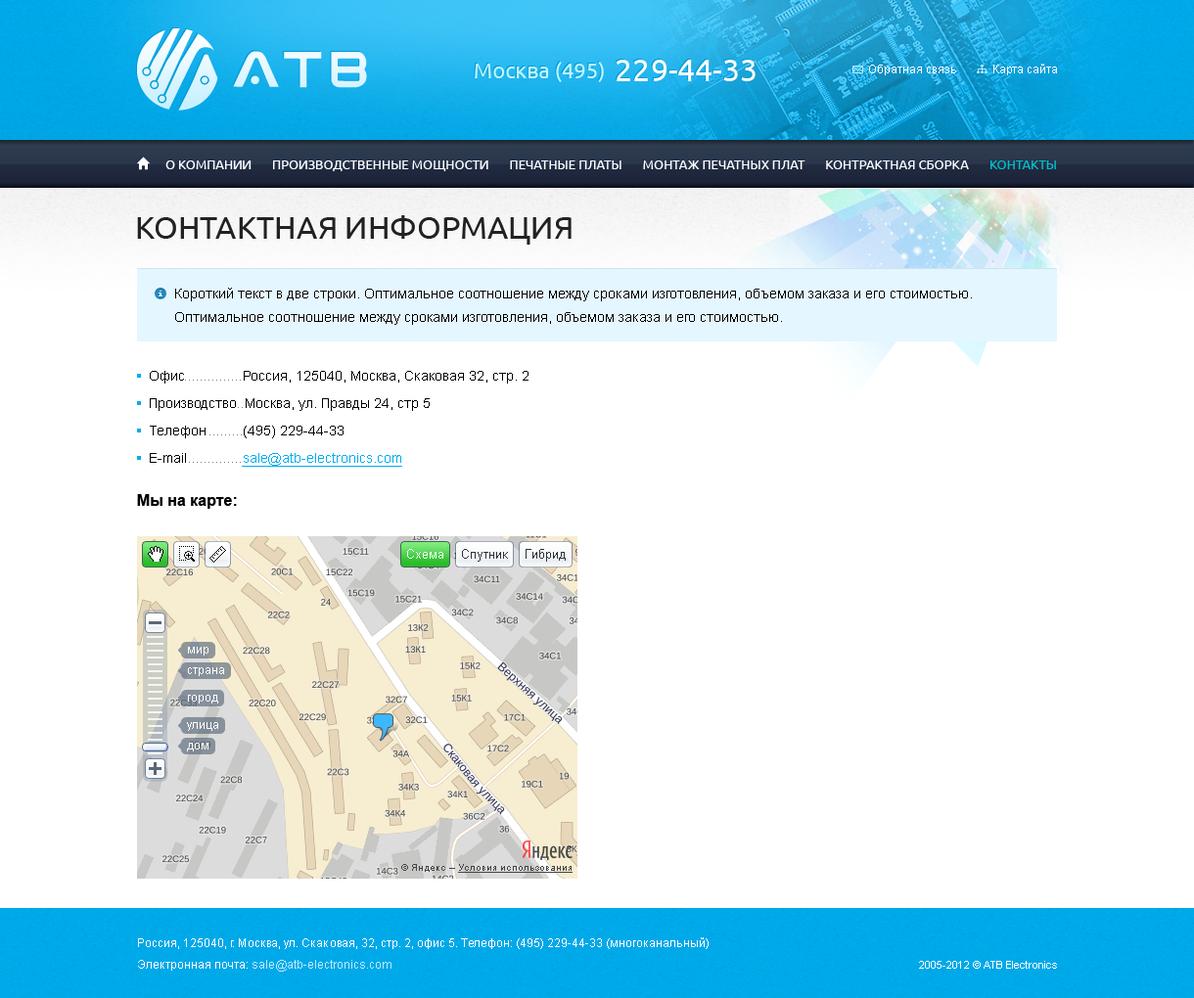
<style>
.page{position:relative;width:1194px;height:998px;background:#ffffff}
.page>*{position:absolute;margin:0}
.t1{font:21.5px "Ubuntu";color:#c0f7ff}
.t2{font:31.3px "Ubuntu";color:#ffffff}
.t3{font:11.7px "ArialMT";color:#ffffff}
.t4{font:12.7px "Ubuntu";color:#ffffff;text-transform:uppercase}
.t5{font:12.7px "Ubuntu";color:#00c1c8;text-transform:uppercase}
.t6{font:31.3px "Ubuntu";color:#222222;text-transform:uppercase}
.t7{font:13.7px/23.5px "ArialMT";color:#000000}
.t8{font:13.7px/27.4px "ArialMT";color:#000000}
.t9{font:13.7px/27.4px "ArialMT";color:#00adef;text-decoration:underline}
.t10{font:15.7px "Arial-BoldMT";color:#000000}
.t11{font:11.7px/21.5px "ArialMT";color:#ffffff}
.t12{font:11.7px/21.5px "ArialMT";color:#b9ecff}
.t13{font:10.8px "ArialMT";color:#ffffff}
</style>
<div class="page">
<p class="t1" style="left:475px;top:60px;width:281px;height:22px">Москва (495)  <span class="t2">229-44-33</span></p>
<p class="t3" style="left:869px;top:64px;width:188px;height:11px">Обратная связь            Карта сайта</p>
<p class="t4" style="left:165px;top:161px;width:891px;height:10px">О Компании       Производственные мощности       Печатные платы       Монтаж печатных плат       Контрактная сборка       <span class="t5">Контакты</span></p>
<p class="t6" style="left:137px;top:215px;width:435px;height:30px">Контактная информация</p>
<p class="t7" style="left:175px;top:288px;width:797px;height:37px">Короткий текст в две строки. Оптимальное соотношение между сроками изготовления, объемом заказа и его стоимостью.<br>Оптимальное соотношение между сроками изготовления, объемом заказа и его стоимостью.</p>
<p class="t8" style="left:150px;top:371px;width:379px;height:96px">Офис    Россия, 125040, Москва, Скаковая 32, стр. 2<br>Производство  Москва, ул. Правды 24, стр 5<br>Телефон  (495) 229-44-33 <br>E-mail  <span class="t9">sale@atb-electronics.com</span></p>
<p class="t10" style="left:137px;top:494px;width:100px;height:15px">Мы на карте:</p>
<p class="t11" style="left:138px;top:938px;width:571px;height:34px">Россия, 125040, г. Москва, ул. Скаковая, 32, стр. 2, офис 5. Телефон: (495) 229-44-33 (многоканальный)<br>Электронная почта: <span class="t12">sale@atb-electronics.com</span></p>
<p class="t13" style="left:919px;top:961px;width:138px;height:8px">2005-2012 © ATB Electronics</p>
</div>
